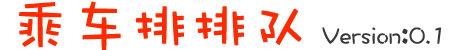
<style>
.page{position:relative;width:458px;height:50px;background:#ffffff}
.page>*{position:absolute;margin:0}
.t1{font:24px "DFWaWaSC-W5";color:#39393a}
.t2{font:60px "DFWaWaSC-W5";color:#ff2a00}
.t3{font:36px "DFWaWaSC-W5";color:#39393a}
</style>
<div class="page">
<p class="t1" style="left:19px;top:1px;width:422px;height:50px"><span class="t2">乘车排排队 </span>Version<span class="t3">:</span>0.1</p>
</div>
